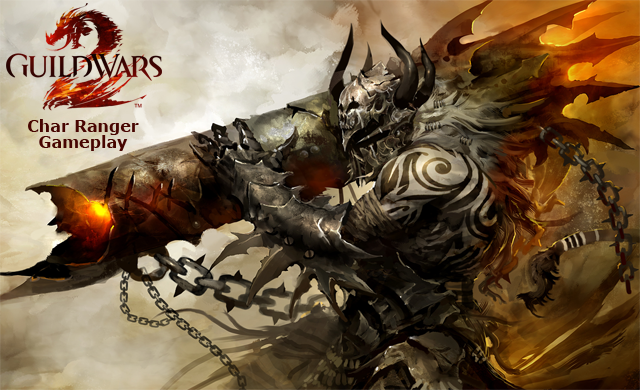
<style>
.page{position:relative;width:640px;height:390px}
.page>*{position:absolute;margin:0}
.t1{font:16px/16px "Verdana-Bold";color:#470501}
</style>
<div class="page">
<p class="t1" style="left:28px;top:119px;width:111px;height:32px;text-align:center">Char Ranger<br>Gameplay</p>
</div>
